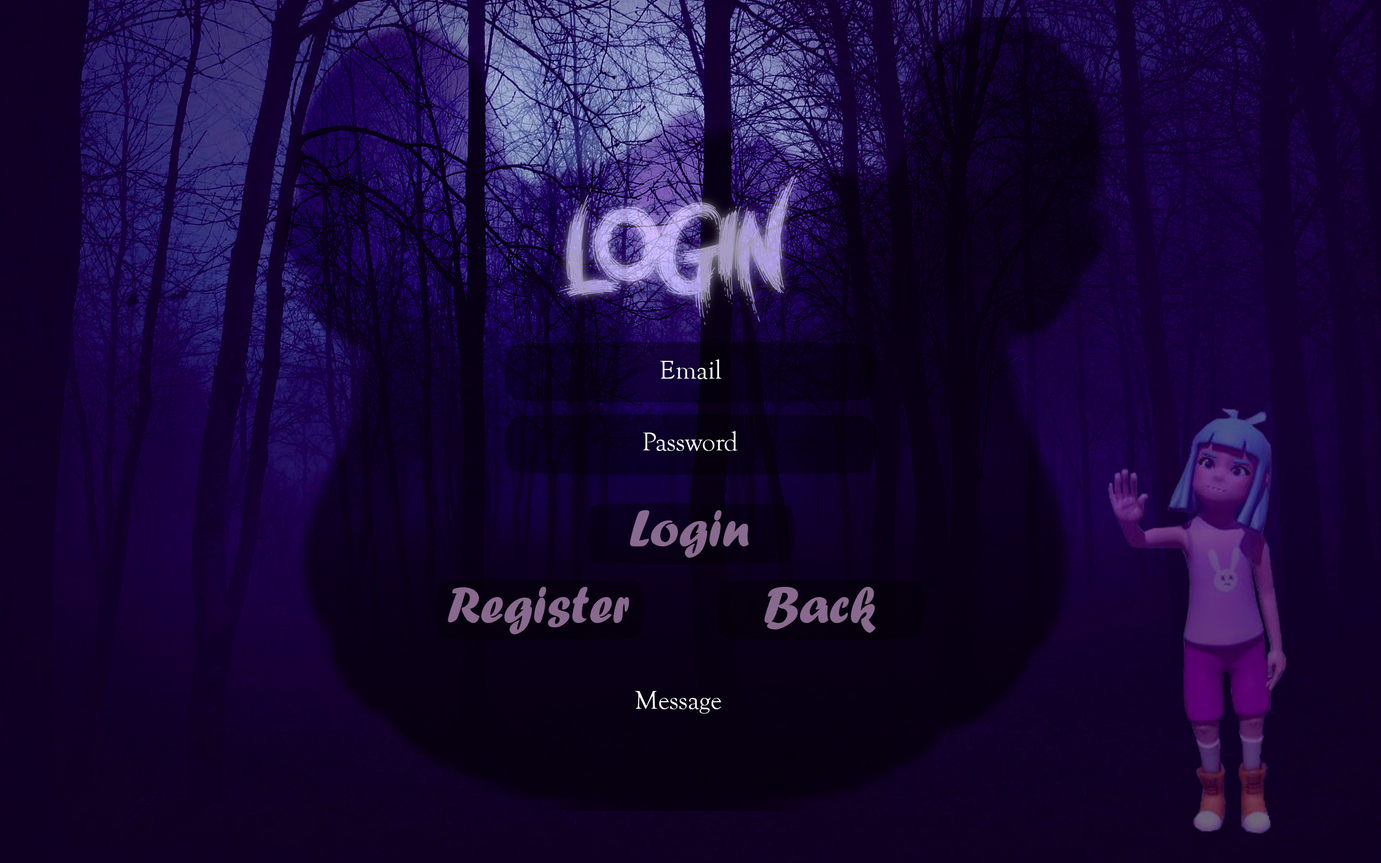
<style>
.page{position:relative;width:1381px;height:863px}
.page>*{position:absolute;margin:0}
.t1{font:107.9px "NightcoreDemo"}
.t2{font:27px "GoudyOldStyleT-Regular";color:#ffffff}
.t3{font:54px "ForteMT";color:#896a90}
.t4{font:54px "ForteMT";color:#896a8f}
</style>
<div class="page">
<p class="t1" style="left:558px;top:170px;width:242px;height:155px">LOGIN</p>
<p class="t1" style="left:558px;top:170px;width:242px;height:155px">LOGIN</p>
<p class="t2" style="left:660px;top:359px;width:62px;height:20px">Email</p>
<p class="t2" style="left:643px;top:431px;width:95px;height:20px">Password</p>
<p class="t3" style="left:630px;top:510px;width:119px;height:48px">Login</p>
<p class="t4" style="left:448px;top:587px;width:181px;height:48px">Register</p>
<p class="t4" style="left:765px;top:587px;width:111px;height:46px">Back</p>
<p class="t2" style="left:635px;top:691px;width:86px;height:23px">Message</p>
</div>
